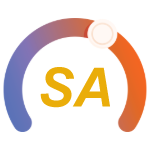
<style>
.page{position:relative;width:150px;height:150px;background:#ffffff}
.page>*{position:absolute;margin:0}
.t1{font:54.1px "Arial-BoldItalicMT";color:#eaad0a}
</style>
<div class="page">
<p class="t1" style="left:40px;top:67px;width:70px;height:41px">SA</p>
</div>
